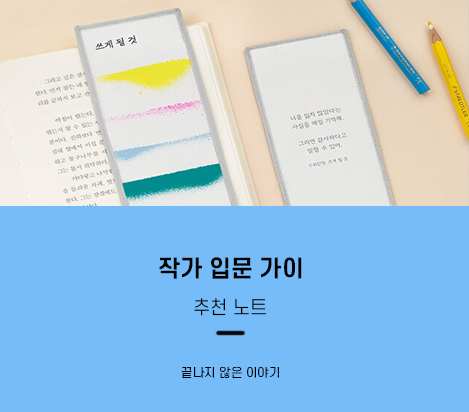
<style>
.page{position:relative;width:469px;height:412px;background:#75bcf8}
.page>*{position:absolute;margin:0}
.t1{font:23px "S-CoreDream-6Bold";color:#010101}
.t2{font:18px "S-CoreDream-3Light";color:#010101}
.t3{font:12px "S-CoreDream-3Light";color:#010101}
</style>
<div class="page">
<p class="t1" style="left:159px;top:257px;width:143px;height:22px">작가 입문 가이</p>
<p class="t2" style="left:194px;top:298px;width:72px;height:18px">추천 노트</p>
<p class="t3" style="left:181px;top:367px;width:98px;height:11px">끝나지 않은 이야기</p>
</div>
